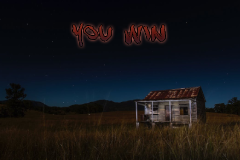
<style>
.page{position:relative;width:240px;height:160px}
.page>*{position:absolute;margin:0}
.t1{font:24px "DJ-Gross"}
</style>
<div class="page">
<p class="t1" style="left:72px;top:22px;width:94px;height:25px">YOU WIN</p>
</div>
